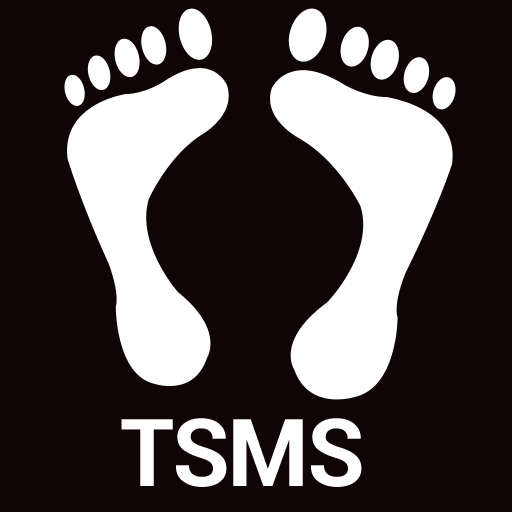
<style>
.page{position:relative;width:512px;height:512px;background:#100405}
.page>*{position:absolute;margin:0}
.t1{font:94px "Roboto-Bold";letter-spacing:-0.025em;color:#ffffff}
</style>
<div class="page">
<p class="t1" style="left:121px;top:418px;width:241px;height:69px">TSMS</p>
</div>
